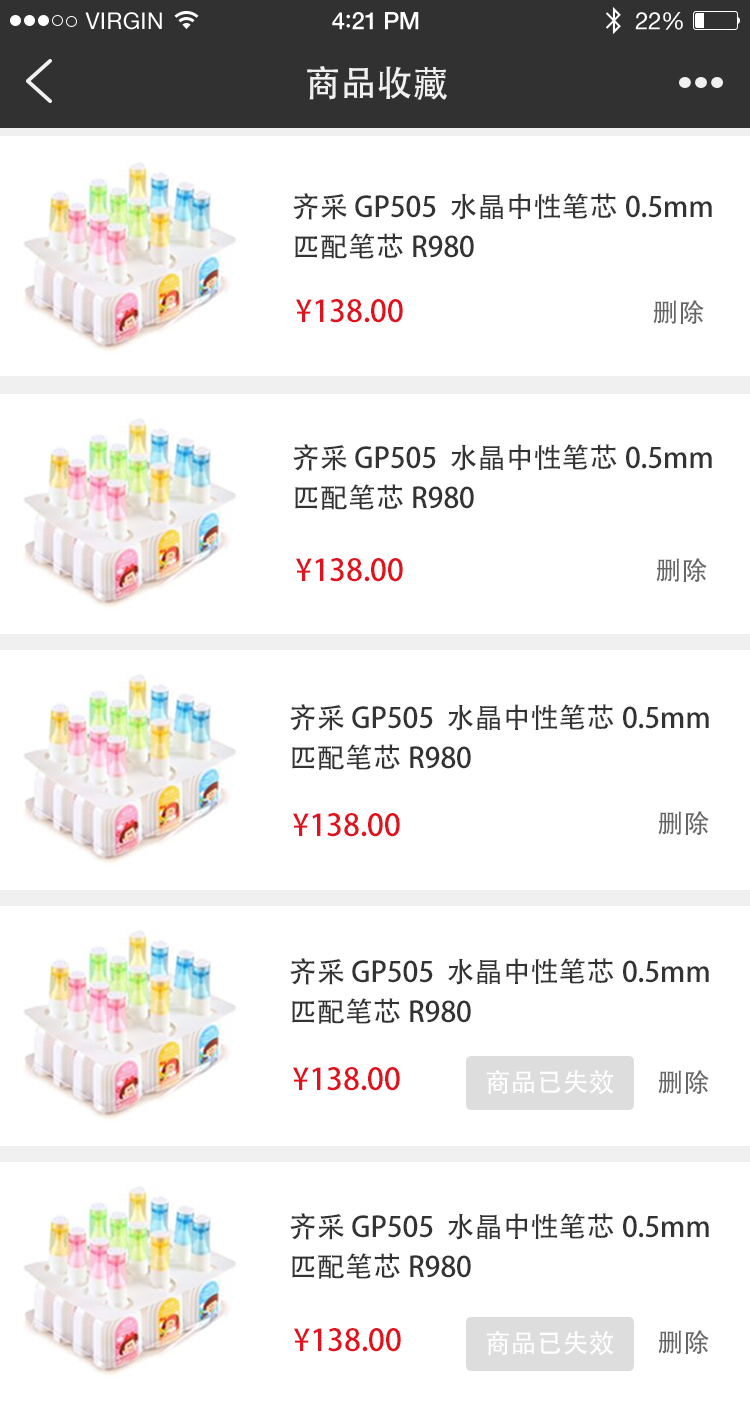
<style>
.page{position:relative;width:750px;height:1402px;background:#ffffff}
.page>*{position:absolute;margin:0}
.t1{font:36px "AdobeHeitiStd-Regular";color:#f0f0f0}
.t2{font:28px/40px "AdobeHeitiStd-Regular";color:#333333}
.t3{font:30px "AdobeHeitiStd-Regular";color:#e0121d}
.t4{font:28px "AdobeHeitiStd-Regular";color:#e0121d;font-weight:bold}
.t5{font:26px "AdobeHeitiStd-Regular";color:#666666}
.t6{font:26px "AdobeHeitiStd-Regular";color:#ffffff}
</style>
<div class="page">
<p class="t1" style="left:307px;top:66px;width:140px;height:34px">商品收藏</p>
<p class="t2" style="left:293px;top:193px;width:419px;height:66px">齐采 GP505  水晶中性笔芯0.5mm <br>匹配笔芯R980</p>
<p class="t3" style="left:295px;top:299px;width:108px;height:24px"><span class="t4"> </span>¥138.00</p>
<p class="t5" style="left:653px;top:300px;width:51px;height:24px">删除</p>
<p class="t2" style="left:293px;top:444px;width:419px;height:66px">齐采 GP505  水晶中性笔芯0.5mm <br>匹配笔芯R980</p>
<p class="t3" style="left:295px;top:558px;width:108px;height:24px"><span class="t4"> </span>¥138.00</p>
<p class="t5" style="left:656px;top:558px;width:51px;height:24px">删除</p>
<p class="t2" style="left:290px;top:704px;width:419px;height:66px">齐采 GP505  水晶中性笔芯0.5mm<br>匹配笔芯R980</p>
<p class="t3" style="left:292px;top:813px;width:108px;height:24px"><span class="t4"> </span>¥138.00</p>
<p class="t5" style="left:658px;top:811px;width:51px;height:24px">删除</p>
<p class="t2" style="left:290px;top:958px;width:419px;height:66px">齐采 GP505  水晶中性笔芯0.5mm<br>匹配笔芯R980</p>
<p class="t3" style="left:292px;top:1067px;width:108px;height:24px"><span class="t4"> </span>¥138.00</p>
<p class="t6" style="left:486px;top:1070px;width:128px;height:25px">商品已失效</p>
<p class="t5" style="left:658px;top:1070px;width:51px;height:24px">删除</p>
<p class="t2" style="left:290px;top:1213px;width:419px;height:66px">齐采 GP505  水晶中性笔芯0.5mm<br>匹配笔芯R980</p>
<p class="t3" style="left:293px;top:1328px;width:108px;height:24px"><span class="t4"> </span>¥138.00</p>
<p class="t6" style="left:486px;top:1331px;width:128px;height:25px">商品已失效</p>
<p class="t5" style="left:658px;top:1330px;width:51px;height:24px">删除</p>
</div>
